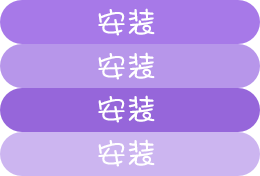
<style>
.page{position:relative;width:260px;height:176px;background:#ccb5f0}
.page>*{position:absolute;margin:0}
.t1{font:30px "DFShaoNvW5";color:#ffffff}
</style>
<div class="page">
<p class="t1" style="left:98px;top:8px;width:57px;height:28px">安装</p>
<p class="t1" style="left:98px;top:52px;width:57px;height:28px">安装</p>
<p class="t1" style="left:98px;top:95px;width:57px;height:28px">安装</p>
<p class="t1" style="left:98px;top:139px;width:57px;height:28px">安装</p>
</div>
